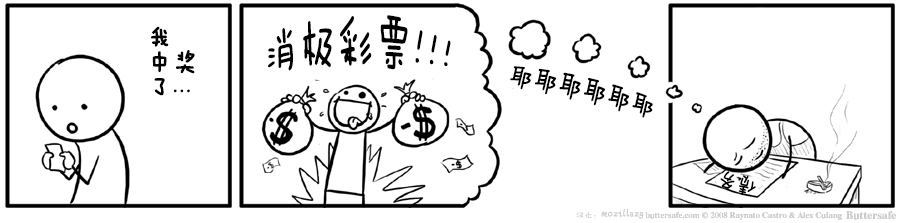
<style>
.page{position:relative;width:900px;height:223px;background:#ffffff}
.page>*{position:absolute;margin:0}
.t1{font:37.5px "FZMWJW--GB1-0";color:#000000}
.t2{font:25px/25px "FZMWJW--GB1-0";color:#000000;font-weight:bold}
.t3{font:25px "FZMWJW--GB1-0";color:#000000}
.t4{font:20.8px "FZMWJW--GB1-0";color:#000000}
.t5{font:12.5px "FZMWJW--GB1-0";color:#cccccc}
.t6{font:8.3px "FZMWJW--GB1-0";color:#cccccc}
</style>
<div class="page">
<p class="t1" style="left:268px;top:15px;width:183px;height:56px">消极彩票!!!</p>
<p class="t2" style="left:151px;top:26px;width:44px;height:70px">我<br>中奖<br>了...</p>
<p class="t3" style="left:510px;top:66px;width:143px;height:52px;rotate:13deg">耶耶耶耶耶耶</p>
<p class="t4" style="left:720px;top:171px;width:36px;height:24px;rotate:-164deg">债务</p>
<p class="t5" style="left:576px;top:209px;width:68px;height:10px"><span class="t6">汉化：</span>mozillazg</p>
</div>
